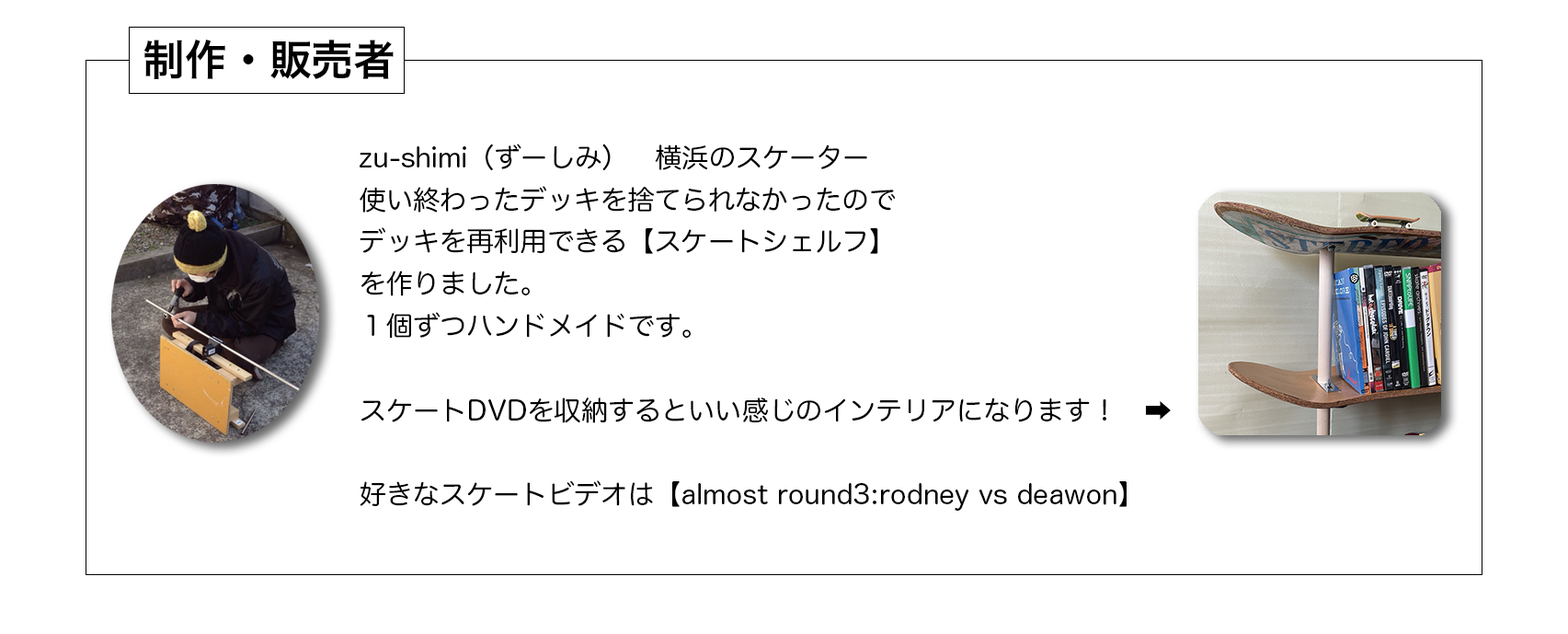
<style>
.page{position:relative;width:1568px;height:634px;background:#ffffff}
.page>*{position:absolute;margin:0}
.t1{font:42.2px "HiraKakuProN-W6";color:#000000}
.t2{font:26.8px/42.2px "HiraMaruProN-W4";color:#000000}
.t3{font:26.8px/42.2px "KozGoPr6N-Regular";color:#000000}
</style>
<div class="page">
<p class="t1" style="left:143px;top:39px;width:251px;height:40px">制作・販売者</p>
<p class="t2" style="left:360px;top:143px;width:811px;height:367px">zu-shimi（ずーしみ）　横浜のスケーター<br>使い終わったデッキを捨てられなかったので<br>デッキを再利用できる【スケートシェルフ】<br>を作りました。<br>１個ずつハンドメイドです。<br><br>スケートDVDを収納するといい感じのインテリアになります！　<span class="t3">➡️<br></span>　　　　<br>好きなスケートビデオは【almost round3:rodney vs deawon】</p>
</div>
